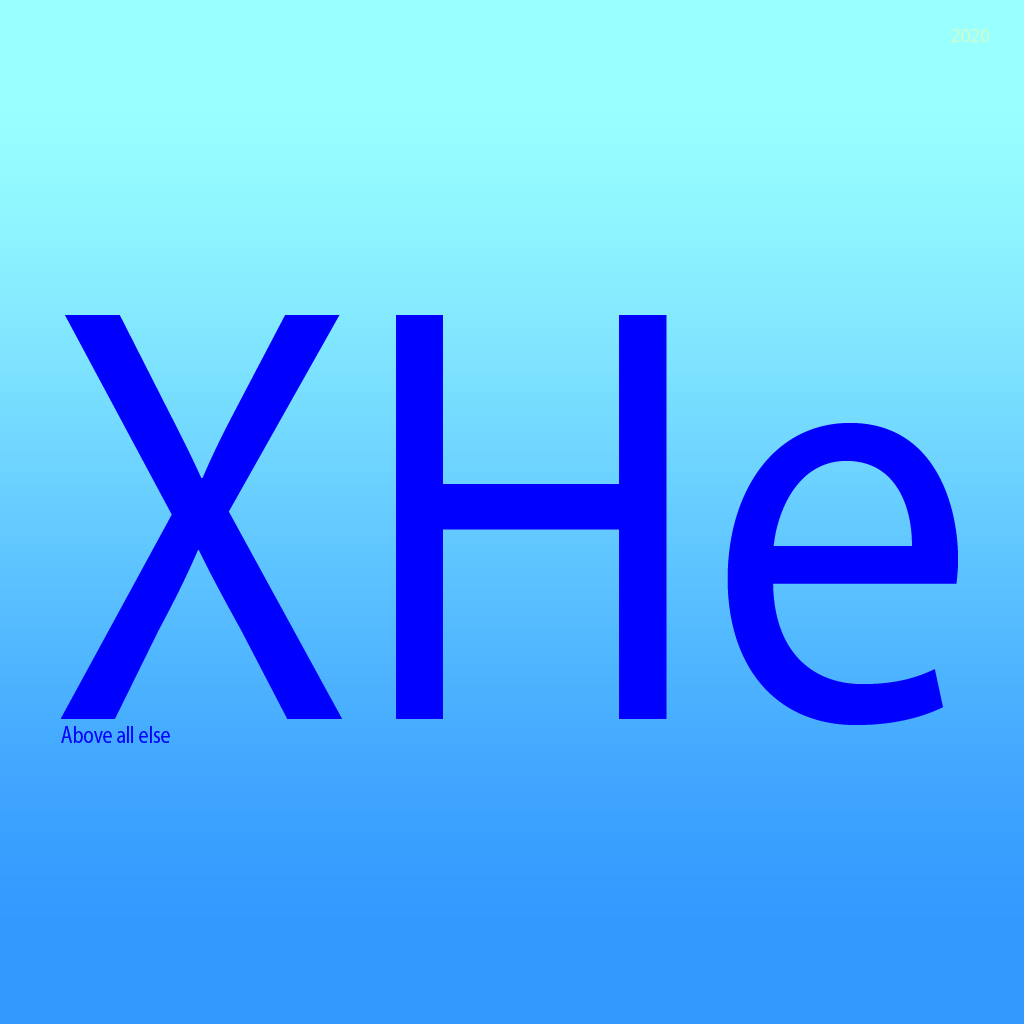
<style>
.page{position:relative;width:1024px;height:1024px}
.page>*{position:absolute;margin:0}
.t1{font:19.9px "MyriadPro-Regular";color:#ccffcc;scale:0.96 1}
.t2{font:600px "MyriadPro-Regular";color:#0000ff;scale:0.9 1}
.t3{font:24px "MyriadPro-Regular";color:#0000ff;scale:0.8 1}
</style>
<div class="page">
<p class="t1" style="left:951px;top:29px;width:38px;height:13px">2020</p>
<p class="t2" style="left:60px;top:315px;width:898px;height:410px">XHe</p>
<p class="t3" style="left:61px;top:726px;width:109px;height:17px">Above all else</p>
</div>
